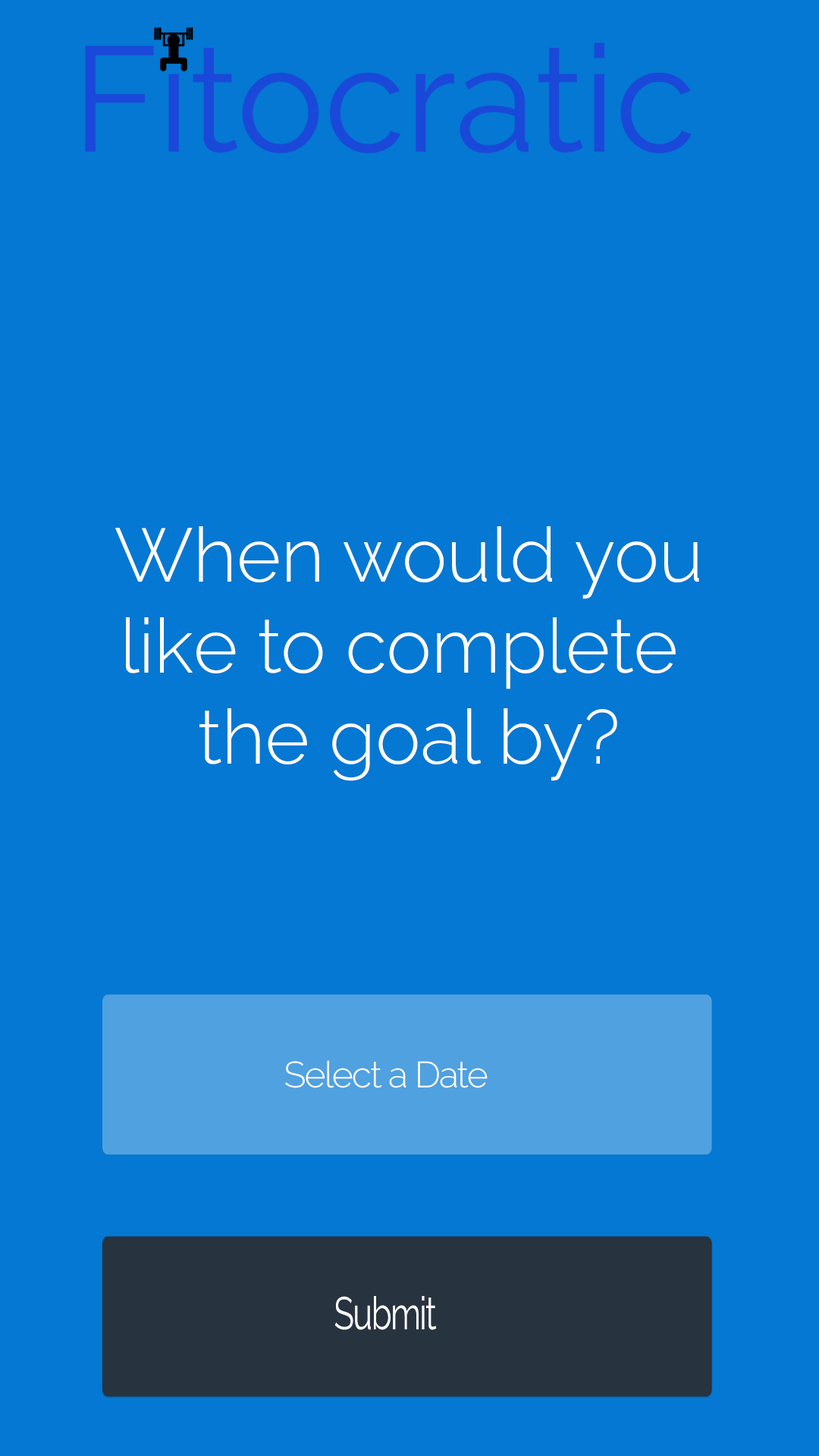
<style>
.page{position:relative;width:819px;height:1456px;background:#0478d2}
.page>*{position:absolute;margin:0}
.t1{font:75.8px "Raleway-Light";color:#ffffff}
.t2{font:36.4px "Raleway-Light";letter-spacing:-0.04em;color:#ffffff}
.t3{font:45.5px "Raleway";letter-spacing:-0.04em;color:#ffffff;scale:0.73 1}
</style>
<div class="page">
<p class="t1" style="left:115px;top:526px;width:584px;height:255px;text-align:center">When would you<br>like to complete <br>the goal by?</p>
<p class="t2" style="left:285px;top:1060px;width:203px;height:28px">Select a Date</p>
<p class="t3" style="left:334px;top:1296px;width:103px;height:34px">Submit</p>
</div>
